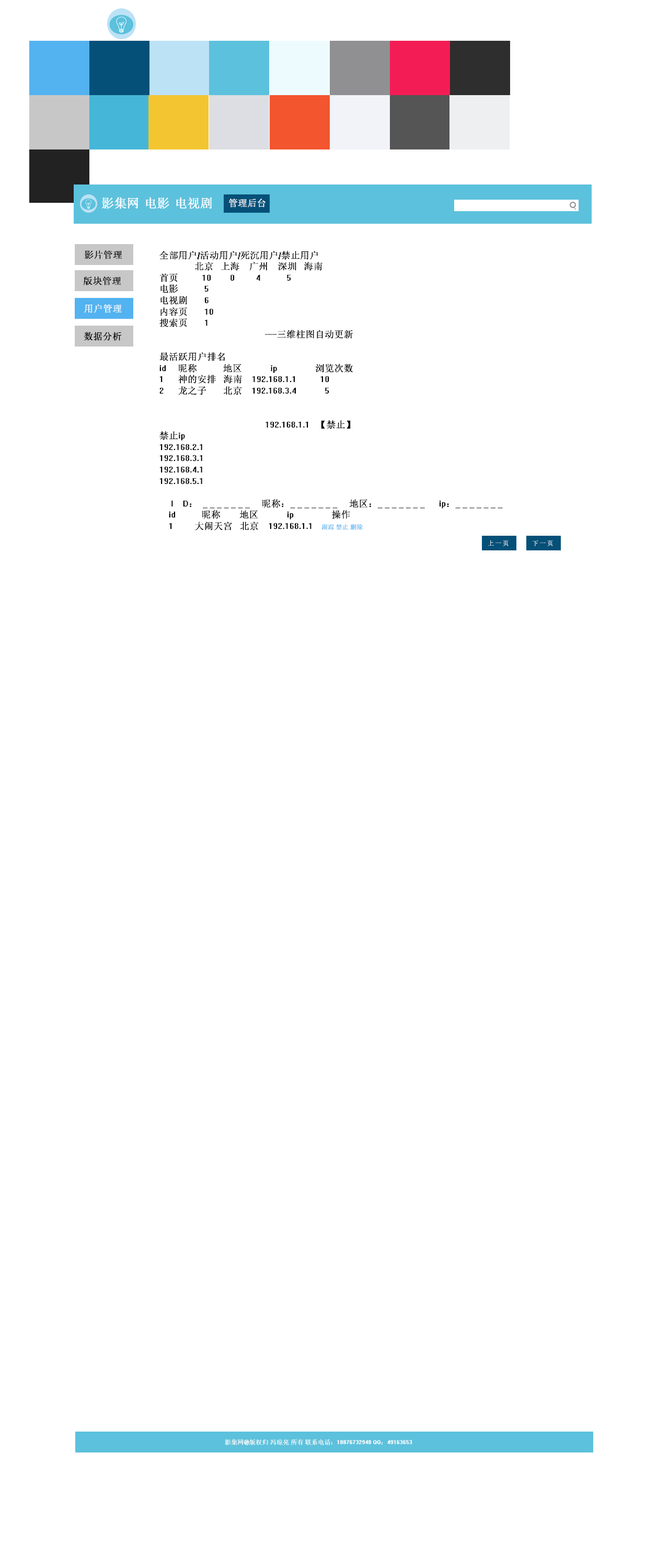
<style>
.page{position:relative;width:669px;height:1568px;background:#ffffff}
.page>*{position:absolute;margin:0}
.t1{font:12.5px "System";color:#ffffff}
.t2{font:12.6px "System";color:#ffffff}
.t3{font:9.4px "System";color:#ffffff}
.t4{font:9.4px "System";color:#000000}
.t5{font:6.3px "System";color:#53b2f0}
.t6{font:6.3px "System";color:#f41c54}
.t7{font:7.3px "System";color:#ffffff}
.t8{font:6.3px "System";color:#ffffff}
</style>
<div class="page">
<p class="t1" style="left:102px;top:197px;width:37px;height:12px">影集网</p>
<p class="t2" style="left:146px;top:197px;width:23px;height:12px">电影</p>
<p class="t2" style="left:176px;top:197px;width:36px;height:12px">电视剧</p>
<p class="t3" style="left:229px;top:199px;width:37px;height:8px">管理后台</p>
<p class="t4" style="left:84px;top:250px;width:38px;height:9px">影片管理</p>
<p class="t4" style="left:159px;top:251px;width:344px;height:280px">全部用户/活动用户/死沉用户/禁止用户 <br>               北京   上海    广州    深圳   海南   <br>首页          10        0         4           5 <br>电影           5<br>电视剧       6<br>内容页       10<br>搜索页       1<br>                                             -----三维柱图自动更新<br><br>最活跃用户排名<br>id     昵称           地区            ip                浏览次数<br>1      神的安排   海南    192.168.1.1          10<br>2      龙之子       北京    192.168.3.4            5<br><br><br>                                             192.168.1.1   【禁止】<br>禁止ip<br>192.168.2.1<br>192.168.3.1<br>192.168.4.1<br>192.168.5.1<br><br>     I    D：  _ _ _ _ _ _ _     昵称：_ _ _ _ _ _ _     地区：_ _ _ _ _ _ _      ip：_ _ _ _ _ _ _                                                                                                                  <br>    id           昵称        地区            ip                操作<br>    1         大闹天宫   北京    192.168.1.1   <span class="t5"> 跟踪 禁止 删除<br><br><br><br><br></span> 线上影片<br>     I    D：  _ _ _ _ _ _ _     名称：_ _ _ _ _ _ _                                                                                  <br>    类型： □电影  □电视剧                                                                     <span class="t6">电影+电视剧                                          </span><span class="t5">删除<br></span>    地区： □英美  □日韩  □港台  □内地                                             <span class="t6">英美+日韩+港台+内地                          </span><span class="t5">删除<br></span>    排序： □时间  □评分  □收藏  □下载  □浏览  □赞数  □留言   <span class="t6">时间+评分+收藏+下载+浏览+赞数     </span><span class="t5">删除            </span>查询<br>    id            名称        类型    地区   评分     收藏  下载    浏览   赞数  留言  上线时间     作用版块            操作<br>    1         大闹天宫    电影    内地    8.0        1         5         1           1       10     2014-01-01   首面、内容页   <span class="t5">编辑  删除</span></p>
<p class="t4" style="left:83px;top:276px;width:38px;height:9px">版块管理</p>
<p class="t3" style="left:84px;top:304px;width:38px;height:9px">用户管理</p>
<p class="t4" style="left:84px;top:332px;width:38px;height:9px">数据分析</p>
<p class="t7" style="left:488px;top:540px;width:21px;height:6px">上一页</p>
<p class="t7" style="left:533px;top:540px;width:20px;height:6px">下一页</p>
<p class="t8" style="left:225px;top:1439px;width:187px;height:6px">影集网@版权归 冯琼亮 所有 联系电话：18876732948 QQ：49163653</p>
</div>
